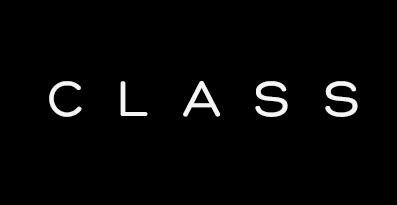
<style>
.page{position:relative;width:397px;height:205px;background:#000000}
.page>*{position:absolute;margin:0}
.t1{font:91.1px "Hero";letter-spacing:0.6em;color:#f5f5f5;font-weight:bold}
</style>
<div class="page">
<p class="t1" style="left:49px;top:81px;width:309px;height:36px">CLASS</p>
</div>
